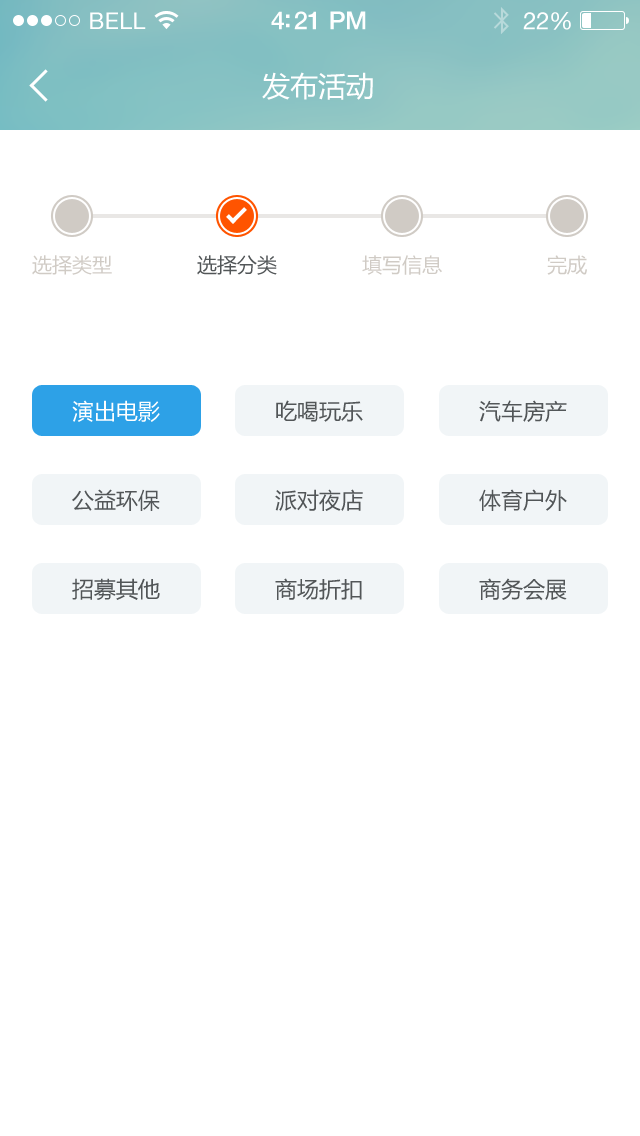
<style>
.page{position:relative;width:640px;height:1136px;background:#ffffff}
.page>*{position:absolute;margin:0}
.t1{font:23px "HelveticaNeue";letter-spacing:0.02em;color:#ffffff}
.t2{font:25px "HelveticaNeue-Medium";letter-spacing:-0.02em;color:#ffffff}
.t3{font:24px "HelveticaNeue";letter-spacing:-0.02em;color:#ffffff}
.t4{font:28px "MicrosoftYaHei";color:#ffffff}
.t5{font:20px "MicrosoftYaHei";color:#d0cbc5}
.t6{font:20px "MicrosoftYaHei";color:#525658}
.t7{font:22px "MicrosoftYaHei";color:#ffffff}
.t8{font:22px "MicrosoftYaHei";color:#525658}
</style>
<div class="page">
<p class="t1" style="left:90px;top:12px;width:56px;height:17px">BELL</p>
<p class="t2" style="left:271px;top:11px;width:95px;height:19px">4:21 PM</p>
<p class="t3" style="left:523px;top:12px;width:48px;height:18px">22%</p>
<p class="t4" style="left:262px;top:72px;width:111px;height:28px">发布活动</p>
<p class="t5" style="left:32px;top:255px;width:80px;height:20px">选择类型</p>
<p class="t6" style="left:197px;top:255px;width:80px;height:20px">选择分类</p>
<p class="t5" style="left:362px;top:255px;width:80px;height:20px">填写信息</p>
<p class="t5" style="left:547px;top:255px;width:40px;height:20px">完成</p>
<p class="t7" style="left:72px;top:400px;width:88px;height:22px">演出电影</p>
<p class="t8" style="left:276px;top:400px;width:87px;height:22px">吃喝玩乐</p>
<p class="t8" style="left:479px;top:400px;width:88px;height:22px">汽车房产</p>
<p class="t8" style="left:72px;top:489px;width:88px;height:22px">公益环保</p>
<p class="t8" style="left:275px;top:489px;width:88px;height:22px">派对夜店</p>
<p class="t8" style="left:479px;top:489px;width:88px;height:22px">体育户外</p>
<p class="t8" style="left:72px;top:578px;width:88px;height:22px">招募其他</p>
<p class="t8" style="left:275px;top:578px;width:87px;height:22px">商场折扣</p>
<p class="t8" style="left:479px;top:578px;width:88px;height:23px">商务会展</p>
</div>
